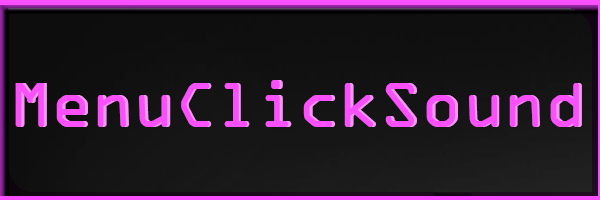
<style>
.page{position:relative;width:600px;height:200px}
.page>*{position:absolute;margin:0}
.t1{font:68.1px "OCRAExtended";color:#f950fb}
.t2{font:68.1px "OCRAExtended"}
</style>
<div class="page">
<p class="t1" style="left:15px;top:80px;width:564px;height:47px">MenuClickSound</p>
<p class="t2" style="left:18px;top:80px;width:564px;height:47px">MenuClickSound</p>
</div>
